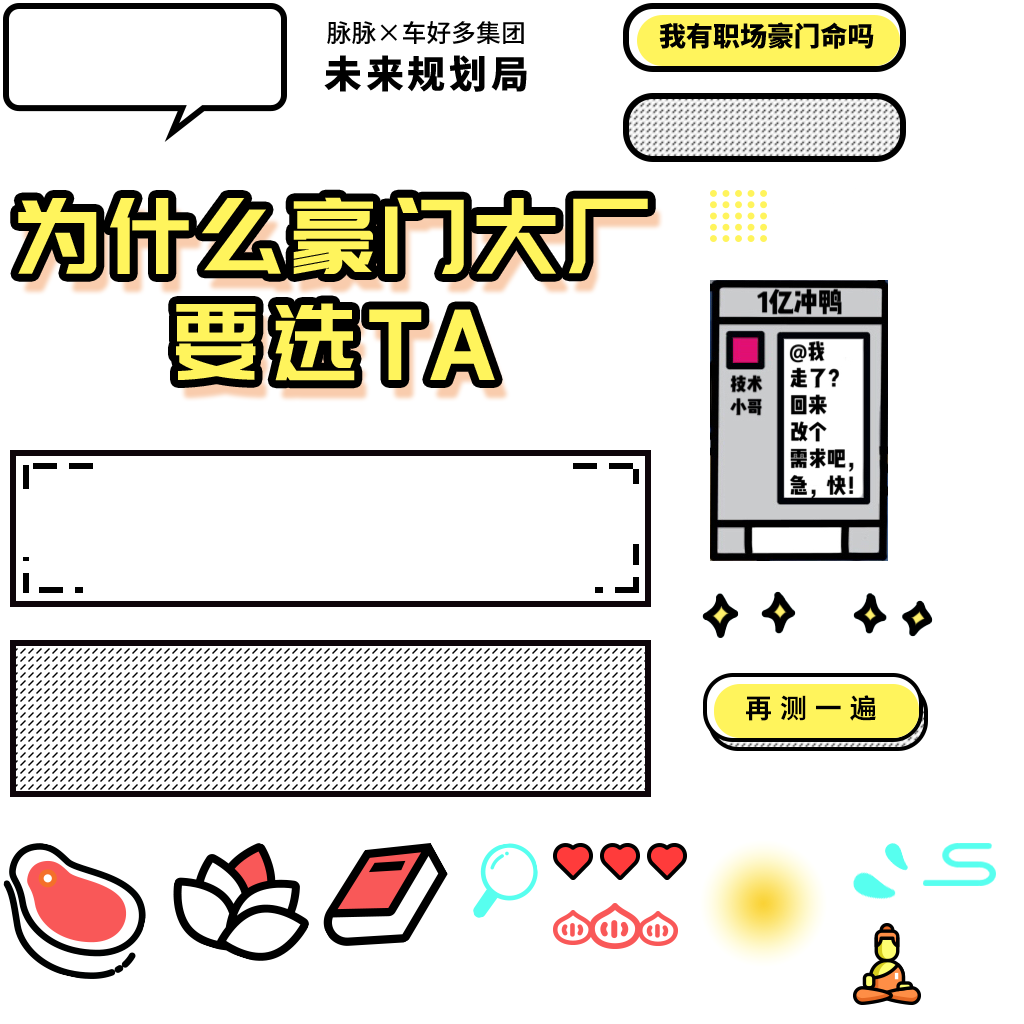
<style>
.page{position:relative;width:1024px;height:1024px;background:#ffffff}
.page>*{position:absolute;margin:0}
.t1{font:24.9px/35px "SourceHanSansCN-Medium";color:#000000}
.t2{font:37.9px/35px "SourceHanSansCN-Heavy";letter-spacing:0.1em;color:#000000}
.t3{font:26.9px "SourceHanSansCN-Heavy";color:#000000}
.t4{font:105.9px/105.9px "PangMenZhengDao";letter-spacing:0.1em;color:#fff45c;scale:0.85 1}
.t5{font:26.9px "SourceHanSansCN-Bold";letter-spacing:0.3em;color:#000000}
</style>
<div class="page">
<p class="t1" style="left:324px;top:21px;width:203px;height:71px;text-align:center">脉脉×车好多集团<br><span class="t2">未来规划局</span></p>
<p class="t3" style="left:659px;top:22px;width:215px;height:27px">我有职场豪门命吗</p>
<p class="t4" style="left:18px;top:197px;width:630px;height:184px;text-align:center">为什么豪门大厂<br>要选TA</p>
<p class="t5" style="left:746px;top:695px;width:130px;height:26px">再测一遍</p>
</div>
